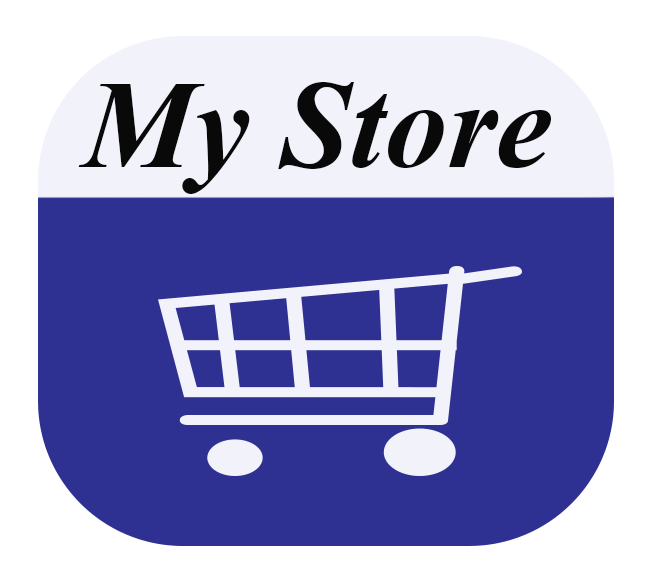
<style>
.page{position:relative;width:664px;height:578px;background:#2e3192}
.page>*{position:absolute;margin:0}
.t1{font:125px "TimesNewRomanPS-BoldItalicMT";color:#09090a}
</style>
<div class="page">
<p class="t1" style="left:78px;top:82px;width:474px;height:112px">My Store</p>
</div>
